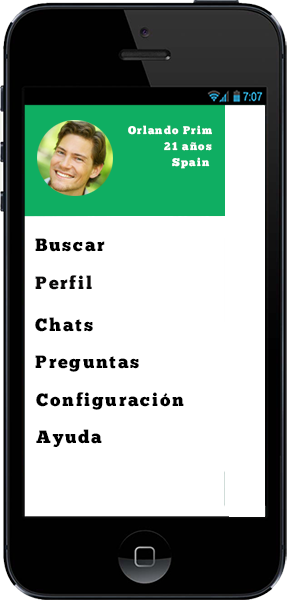
<style>
.page{position:relative;width:287px;height:600px;background:#ffffff}
.page>*{position:absolute;margin:0}
.t1{font:11px "ChunkFive-Roman";letter-spacing:0.1em;color:#ffffff}
.t2{font:18px "ChunkFive-Roman";letter-spacing:0.1em;color:#000000}
.t3{font:18px "ChunkFive-Roman";letter-spacing:0.1em;color:#0a0909}
.t4{font:18px "ChunkFive-Roman";letter-spacing:0.1em;color:#ffffff}
</style>
<div class="page">
<p class="t1" style="left:128px;top:125px;width:84px;height:10px">Orlando Prim</p>
<p class="t1" style="left:164px;top:142px;width:48px;height:9px">21 años</p>
<p class="t1" style="left:172px;top:157px;width:38px;height:12px">Spain</p>
<p class="t2" style="left:35px;top:238px;width:70px;height:14px">Buscar</p>
<p class="t3" style="left:35px;top:275px;width:57px;height:15px"><span class="t4">  </span>Perfil</p>
<p class="t2" style="left:35px;top:317px;width:58px;height:15px">Chats</p>
<p class="t2" style="left:35px;top:355px;width:104px;height:17px">Preguntas</p>
<p class="t2" style="left:36px;top:392px;width:148px;height:18px">Configuración</p>
<p class="t2" style="left:36px;top:429px;width:66px;height:18px">Ayuda</p>
</div>
